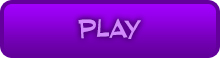
<style>
.page{position:relative;width:220px;height:58px}
.page>*{position:absolute;margin:0}
.t1{font:36px "RedStateBlueStateBB";color:#d189fb}
</style>
<div class="page">
<p class="t1" style="left:78px;top:18px;width:63px;height:21px">Play</p>
</div>
